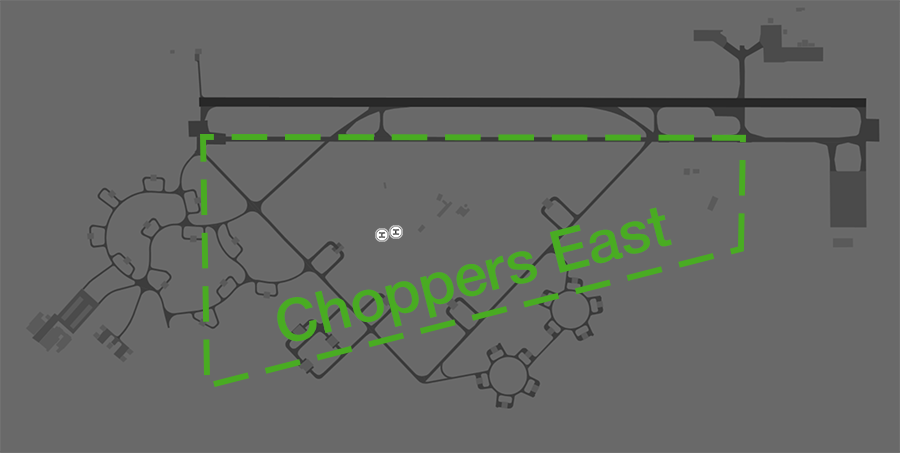
<style>
.page{position:relative;width:900px;height:453px;background:#696969}
.page>*{position:absolute;margin:0}
.t1{font:59.1px "HelveticaNeue-Medium";color:#49ac22}
</style>
<div class="page">
<p class="t1" style="left:277px;top:207px;width:395px;height:135px;text-align:center">Choppers East</p>
</div>
